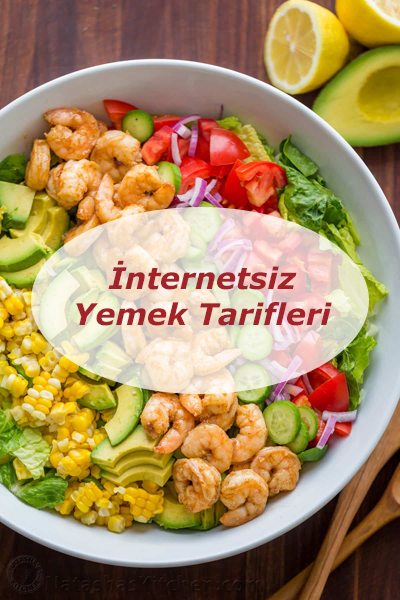
<style>
.page{position:relative;width:400px;height:600px}
.page>*{position:absolute;margin:0}
.t1{font:30px "Verdana-BoldItalic";color:#a2242a}
</style>
<div class="page">
<p class="t1" style="left:76px;top:260px;width:256px;height:66px;text-align:center">İnternetsiz<br>Yemek Tarifleri</p>
</div>
